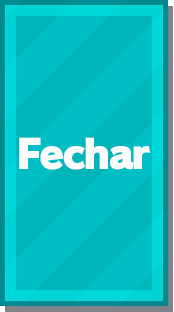
<style>
.page{position:relative;width:174px;height:312px;background:#00bec4}
.page>*{position:absolute;margin:0}
.t1{font:40px "RodinPro-UB";letter-spacing:-0.059em;color:#fafcfc}
</style>
<div class="page">
<p class="t1" style="left:19px;top:137px;width:131px;height:33px">Fechar</p>
</div>
